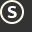
<style>
.page{position:relative;width:32px;height:32px;background:#333333}
.page>*{position:absolute;margin:0}
.t1{font:18px "Ubuntu-Bold";color:#fefefe}
</style>
<div class="page">
<p class="t1" style="left:7px;top:6px;width:10px;height:12px">S</p>
</div>
